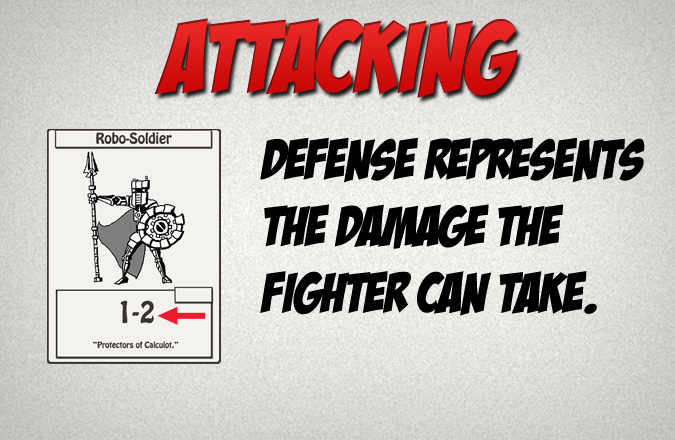
<style>
.page{position:relative;width:675px;height:440px}
.page>*{position:absolute;margin:0}
.t1{font:100px "BadaBoomBB";color:#d81616}
.t2{font:55.6px "BadaBoomBB";color:#000000}
</style>
<div class="page">
<p class="t1" style="left:154px;top:18px;width:364px;height:80px">Attacking</p>
<p class="t2" style="left:260px;top:137px;width:385px;height:179px">Defense represents the damage the fighter can take.</p>
</div>
